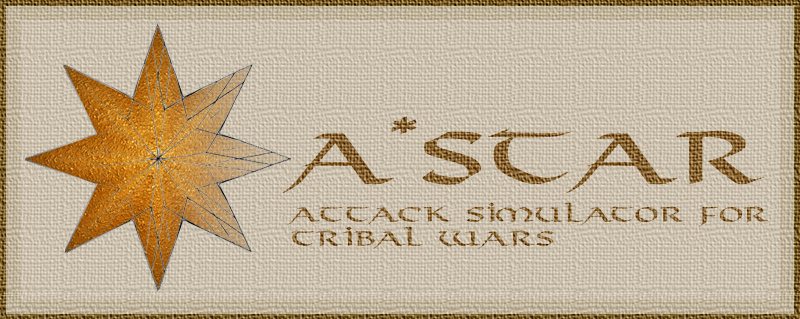
<style>
.page{position:relative;width:800px;height:319px}
.page>*{position:absolute;margin:0}
.t1{font:70px "Viking-Normal";scale:1.4 1}
.t2{font:20px "Viking-Normal";scale:1.4 1}
</style>
<div class="page">
<p class="t1" style="left:280px;top:116px;width:484px;height:78px">A*Star</p>
<p class="t2" style="left:287px;top:202px;width:482px;height:47px">Attack Simulator For<br>Tribal Wars</p>
</div>
